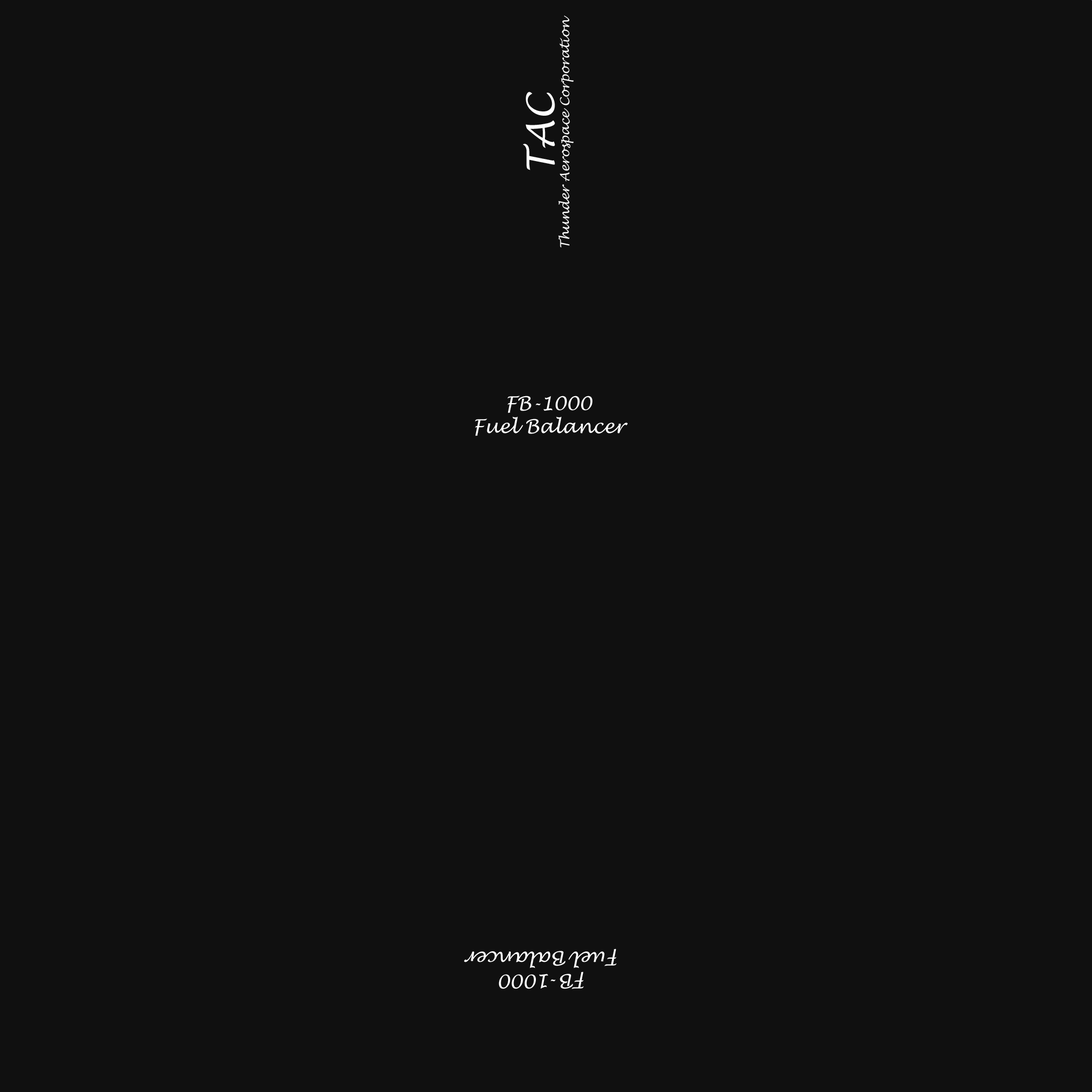
<style>
.page{position:relative;width:1092px;height:1092px;background:#101010}
.page>*{position:absolute;margin:0}
.t1{font:12.8px "LucidaHandwriting-Italic";color:#ffffff}
.t2{font:38.3px "LucidaHandwriting-Italic";color:#ffffff}
.t3{font:19.1px "LucidaHandwriting-Italic";color:#ffffff}
</style>
<div class="page">
<p class="t1" style="left:523px;top:15px;width:51px;height:232px;text-align:center;rotate:-90deg"><span class="t2">TAC<br></span>Thunder Aerospace Corporation</p>
<p class="t3" style="left:475px;top:396px;width:153px;height:40px;text-align:center">FB-1000<br>Fuel Balancer</p>
<p class="t3" style="left:464px;top:949px;width:153px;height:40px;text-align:center;rotate:-180deg">FB-1000<br>Fuel Balancer</p>
</div>
